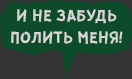
<style>
.page{position:relative;width:132px;height:79px;background:#0d4c2a}
.page>*{position:absolute;margin:0}
.t1{font:18px "GUERRILLA-Normal";color:#d7d6d5}
</style>
<div class="page">
<p class="t1" style="left:11px;top:9px;width:112px;height:35px;text-align:center">И НЕ ЗАБУДЬ<br>ПОЛИТЬ МЕНЯ!</p>
</div>
